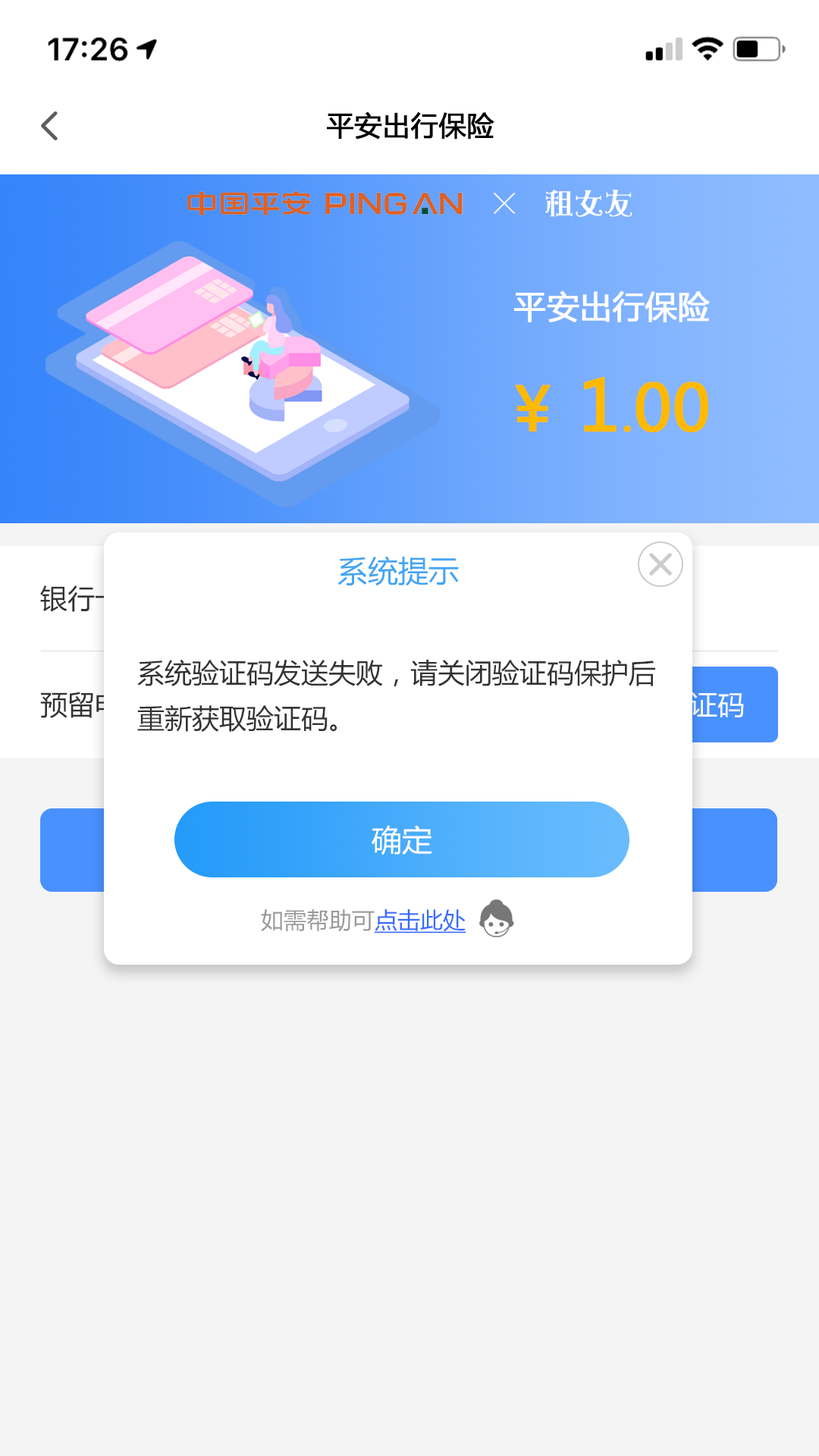
<style>
.page{position:relative;width:819px;height:1456px;background:#f4f4f4}
.page>*{position:absolute;margin:0}
.t1{font:27.3px "MicrosoftYaHei";color:#000000;font-weight:bold}
.t2{font:31.8px "MicrosoftYaHei";color:#ffffff;font-weight:bold}
.t3{font:63.7px "MicrosoftYaHei";color:#ffba00;font-weight:bold}
.t4{font:60.7px "MicrosoftYaHei";color:#ffba00;font-weight:bold}
.t5{font:69.8px "MicrosoftYaHei";color:#ffba00;font-weight:bold}
.t6{font:45.5px "MicrosoftYaHei";color:#ffba00;font-weight:bold}
.t7{font:30.3px "MicrosoftYaHei";color:#43a5f3}
.t8{font:27.3px "MicrosoftYaHei"}
.t9{font:27.3px/45.5px "MicrosoftYaHei";color:#333333}
.t10{font:27.3px "MicrosoftYaHei";color:#333333}
.t11{font:30.3px "MicrosoftYaHei";color:#ffffff}
.t12{font:22.7px "MicrosoftYaHei";color:#999999}
.t13{font:22.7px "MicrosoftYaHei";color:#386cff;text-decoration:underline}
</style>
<div class="page">
<p class="t1" style="left:327px;top:111px;width:167px;height:29px">平安出行保险</p>
<p class="t2" style="left:514px;top:290px;width:196px;height:32px">平安出行保险</p>
<p class="t3" style="left:515px;top:377px;width:193px;height:55px"><span class="t4">￥ </span><span class="t5">1</span><span class="t6">.</span>00</p>
<p class="t7" style="left:337px;top:556px;width:122px;height:30px">系统提示</p>
<p class="t8" style="left:40px;top:585px;width:109px;height:27px">银行卡号</p>
<p class="t9" style="left:137px;top:659px;width:518px;height:73px">系统验证码发送失败，请关闭验证码保护后重新获取验证码。</p>
<p class="t10" style="left:40px;top:692px;width:109px;height:26px">预留电话</p>
<p class="t11" style="left:372px;top:825px;width:60px;height:30px">确定</p>
<p class="t12" style="left:261px;top:909px;width:205px;height:24px">如需帮助可<span class="t13">点击此处</span></p>
</div>
